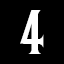
<style>
.page{position:relative;width:64px;height:64px;background:#000000}
.page>*{position:absolute;margin:0}
.t1{font:60px "FHACondensedFrenchNC";color:#ffffff}
</style>
<div class="page">
<p class="t1" style="left:20px;top:10px;width:24px;height:44px">4</p>
</div>
